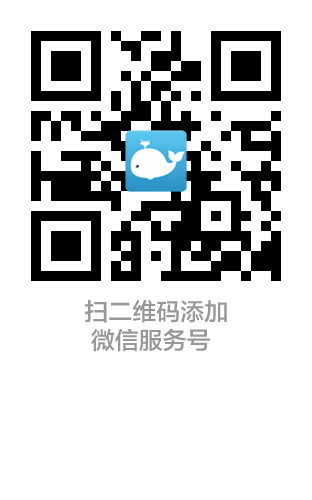
<style>
.page{position:relative;width:312px;height:500px;background:#ffffff}
.page>*{position:absolute;margin:0}
.t1{font:24px "FZLTZHK--GBK1-0";color:#989898}
</style>
<div class="page">
<p class="t1" style="left:84px;top:299px;width:143px;height:53px">扫二维码添加<br> 微信服务号</p>
</div>
